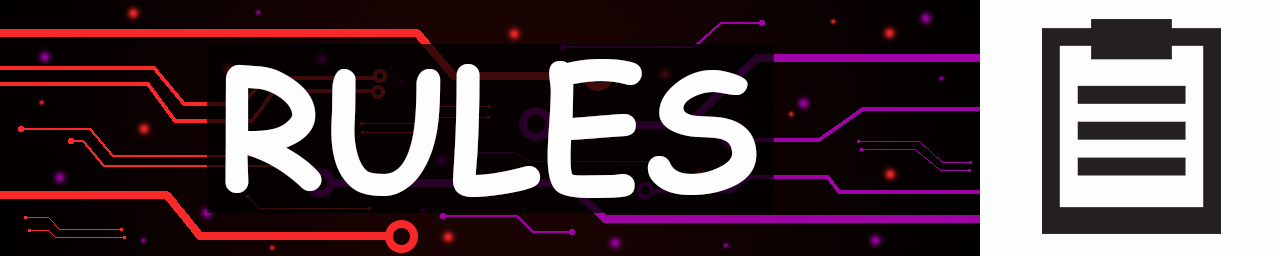
<style>
.page{position:relative;width:1280px;height:256px;background:#fdfdfd}
.page>*{position:absolute;margin:0}
.t1{font:166.7px "ComicSansMS-Bold";color:#fdfdfd}
</style>
<div class="page">
<p class="t1" style="left:225px;top:59px;width:532px;height:139px">RULES</p>
</div>
